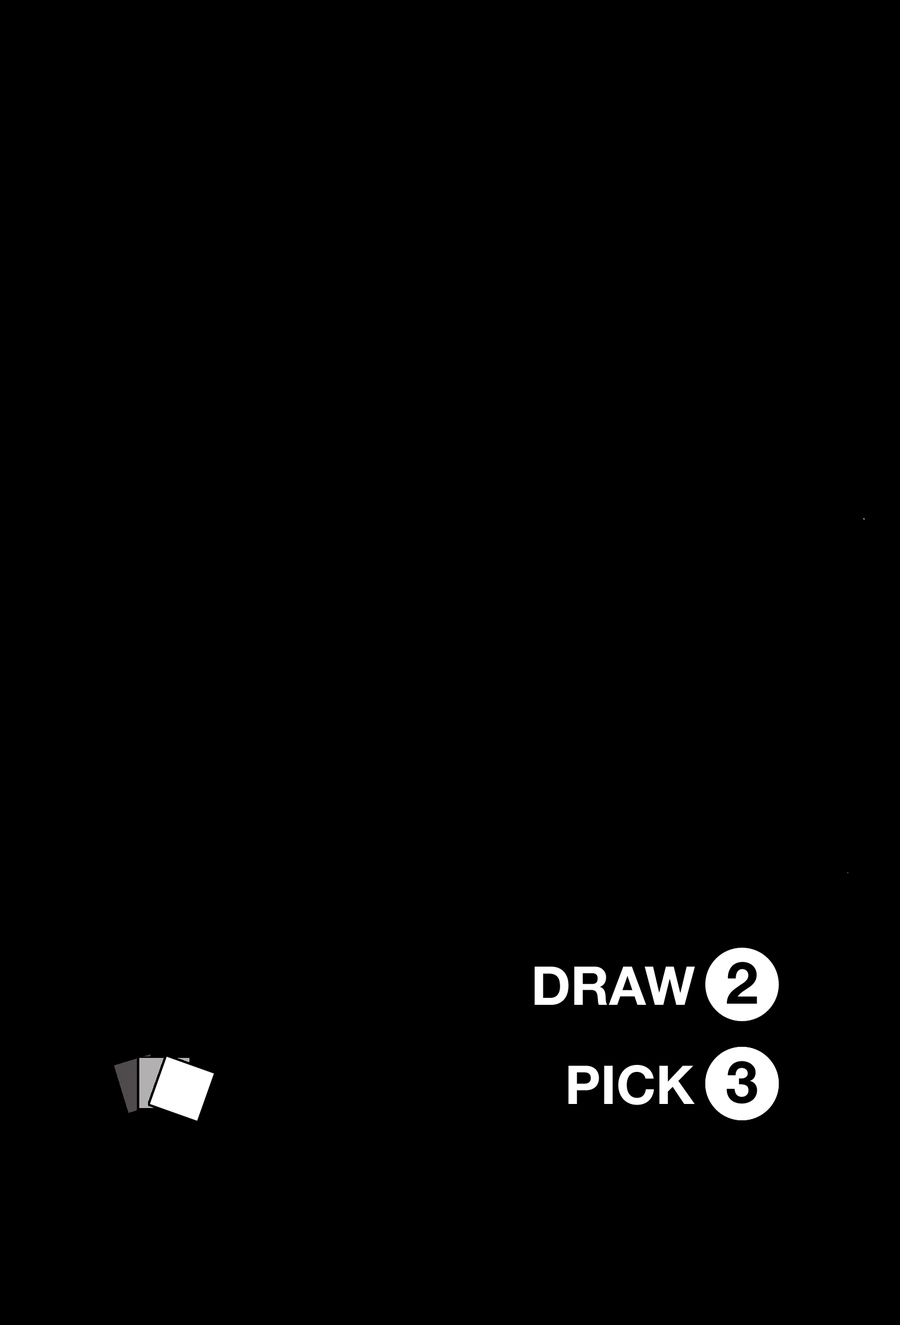
<style>
.page{position:relative;width:900px;height:1325px;background:#000000}
.page>*{position:absolute;margin:0}
.t1{font:58.3px "HelveticaNeue-Bold";color:#000000}
.t2{font:53.4px "HelveticaNeue-Bold";color:#ffffff}
</style>
<div class="page">
<p class="t1" style="left:727px;top:961px;width:30px;height:42px">2</p>
<p class="t2" style="left:535px;top:966px;width:160px;height:39px">DRAW</p>
<p class="t1" style="left:726px;top:1061px;width:31px;height:43px">3</p>
<p class="t1" style="left:727px;top:1059px;width:30px;height:42px">2</p>
<p class="t2" style="left:568px;top:1065px;width:127px;height:40px">PICK</p>
</div>
